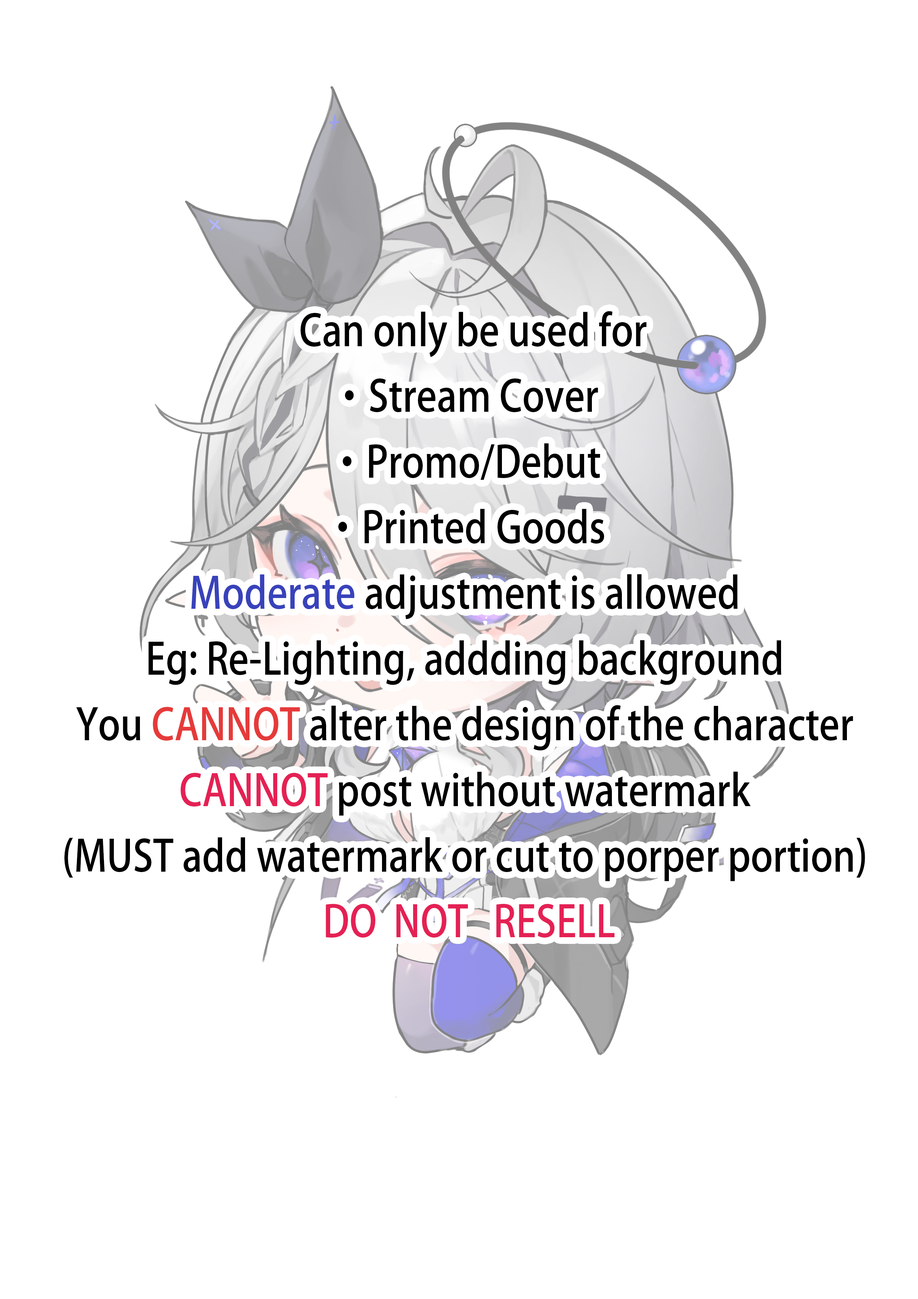
<style>
.page{position:relative;width:918px;height:1299px;background:#ffffff}
.page>*{position:absolute;margin:0}
.t1{font:43.1px/65.7px "AdobeHeitiStd-Regular";color:#000000;scale:0.87 1}
.t2{font:43.1px/65.7px "AdobeHeitiStd-Regular";color:#3842bb;scale:0.87 1}
.t3{font:43.1px/65.7px "AdobeHeitiStd-Regular";color:#e63a3a;scale:0.87 1}
.t4{font:43.1px/65.7px "AdobeHeitiStd-Regular";color:#e42154;scale:0.87 1}
</style>
<div class="page">
<p class="t1" style="left:64px;top:311px;width:801px;height:627px;text-align:center">Can only be used for<br>·Stream Cover<br>·Promo/Debut<br>·Printed Goods<br><span class="t2">Moderate </span>adjustment is allowed<br>Eg: Re-Lighting, addding background<br>You <span class="t3">CANNOT</span> alter the design of the character<br><span class="t4">CANNOT </span>post without watermark<br>(MUST add watermark or cut to porper portion)<br><span class="t4"> DO  NOT   RESELL</span></p>
</div>
